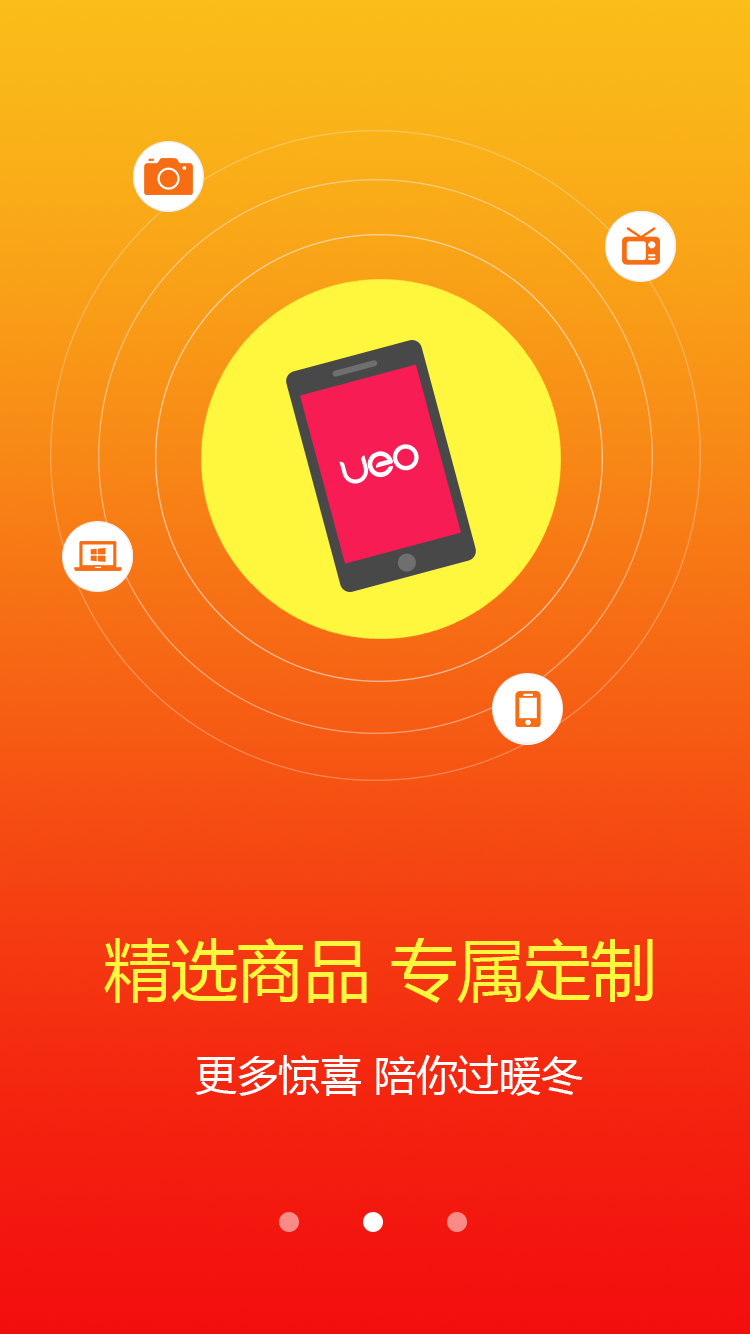
<style>
.page{position:relative;width:750px;height:1334px}
.page>*{position:absolute;margin:0}
.t1{font:66.7px "MicrosoftYaHei";color:#fef73d}
.t2{font:41.7px "MicrosoftYaHei";color:#ffffff}
</style>
<div class="page">
<p class="t1" style="left:104px;top:938px;width:549px;height:65px">精选商品 专属定制</p>
<p class="t2" style="left:195px;top:1055px;width:388px;height:41px">更多惊喜 陪你过暖冬</p>
</div>
